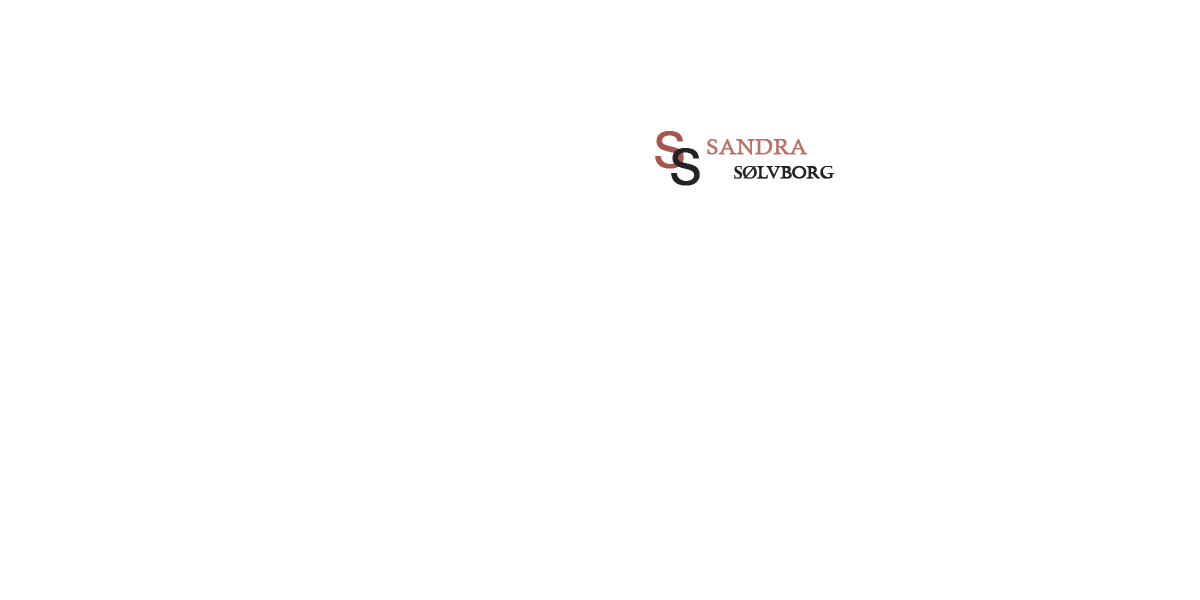
<style>
.page{position:relative;width:1200px;height:600px;background:#ffffff}
.page>*{position:absolute;margin:0}
.t1{font:48px "ArialMT";color:#a8554d;font-weight:bold}
.t2{font:48px "ArialMT";color:#252224;font-weight:bold}
.t3{font:22px "CalistoMT";color:#bb716a;font-weight:bold}
.t4{font:16.5px "Castellar";color:#252224;font-weight:bold}
</style>
<div class="page">
<p class="t1" style="left:655px;top:131px;width:29px;height:38px">S</p>
<p class="t2" style="left:671px;top:148px;width:29px;height:38px">S</p>
<p class="t3" style="left:707px;top:139px;width:100px;height:16px">SANDRA</p>
<p class="t4" style="left:734px;top:166px;width:100px;height:13px">Sølvborg</p>
</div>
